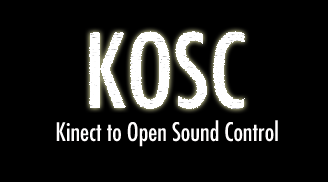
<style>
.page{position:relative;width:328px;height:182px;background:#000000}
.page>*{position:absolute;margin:0}
.t1{font:25px "Futura-CondensedMedium";color:#fffdfd}
</style>
<div class="page">
<p class="t1" style="left:56px;top:120px;width:222px;height:27px">Kinect to Open Sound Control</p>
</div>
